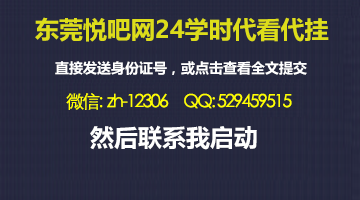
<style>
.page{position:relative;width:360px;height:200px}
.page>*{position:absolute;margin:0}
.t1{font:24px "MicrosoftYaHei-Bold";color:#dddd1a}
.t2{font:14px "MicrosoftYaHei-Bold";color:#ffffff}
.t3{font:24px "MicrosoftYaHei-Bold";color:#ffffff}
</style>
<div class="page">
<p class="t1" style="left:35px;top:17px;width:294px;height:25px">东莞悦吧网24学时代看代挂</p>
<p class="t2" style="left:55px;top:61px;width:252px;height:14px">直接发送身份证号，或点击查看全文提交</p>
<p class="t3" style="left:90px;top:125px;width:167px;height:25px">然后联系我启动</p>
</div>
